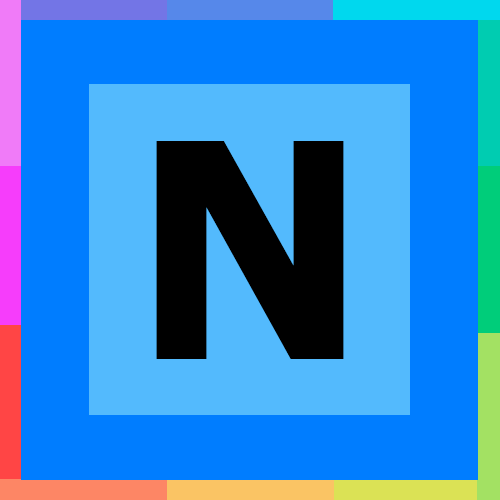
<style>
.page{position:relative;width:500px;height:500px;background:#007dff}
.page>*{position:absolute;margin:0}
.t1{font:300px "Tahoma-Bold";letter-spacing:0.05em;color:#000000}
</style>
<div class="page">
<p class="t1" style="left:156px;top:141px;width:188px;height:218px">N</p>
</div>
